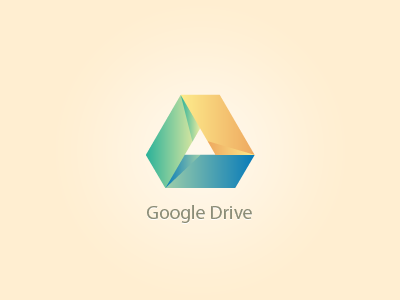
<style>
.page{position:relative;width:400px;height:300px;background:#ffeed1}
.page>*{position:absolute;margin:0}
.t1{font:19.4px "MyriadPro-Regular";color:#8c8d77}
</style>
<div class="page">
<p class="t1" style="left:147px;top:205px;width:105px;height:18px">Google Drive</p>
</div>
